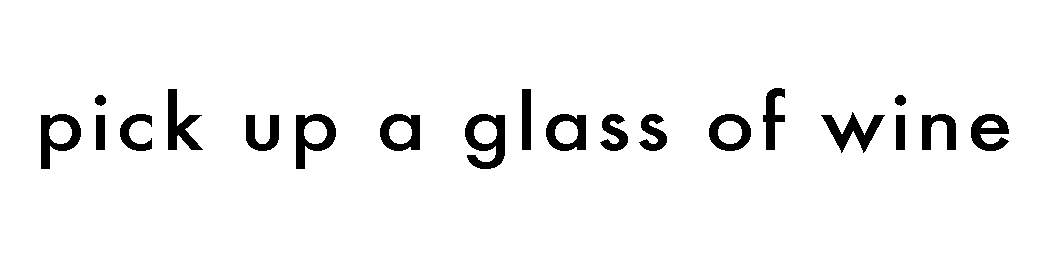
<style>
.page{position:relative;width:1050px;height:256px;background:#ffffff}
.page>*{position:absolute;margin:0}
.t1{font:74.2px "Futura-Medium";letter-spacing:0.06em;color:#000000;scale:1.12 1}
</style>
<div class="page">
<p class="t1" style="left:41px;top:88px;width:968px;height:81px">pick up a glass of wine</p>
</div>
